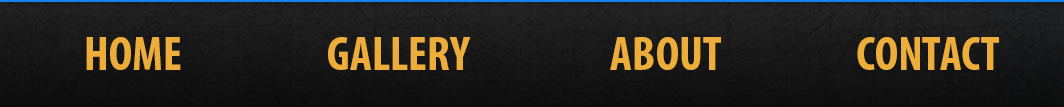
<style>
.page{position:relative;width:1064px;height:107px}
.page>*{position:absolute;margin:0}
.t1{font:48px "MyriadPro-BoldCond";color:#edad3b}
</style>
<div class="page">
<p class="t1" style="left:86px;top:37px;width:95px;height:33px">HOME</p>
<p class="t1" style="left:328px;top:37px;width:143px;height:33px">GALLERY</p>
<p class="t1" style="left:610px;top:37px;width:111px;height:33px">ABOUT</p>
<p class="t1" style="left:857px;top:37px;width:142px;height:33px">CONTACT</p>
</div>
